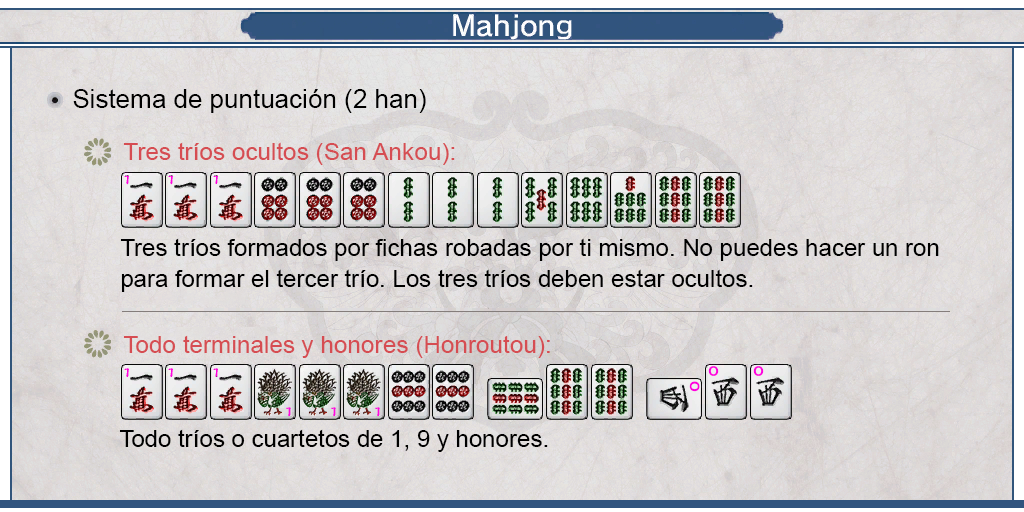
<style>
.page{position:relative;width:1024px;height:512px}
.page>*{position:absolute;margin:0}
.t1{font:26px "ArialMT";color:#000000}
.t2{font:24px "ArialMT";color:#d64d52}
.t3{font:24px/31px "ArialMT";color:#000000}
.t4{font:12.9px "Arial-BoldMT";color:#ff00de;scale:1.07 1}
.t5{font:24px "ArialMT";color:#000000}
</style>
<div class="page">
<p class="t1" style="left:73px;top:89px;width:353px;height:24px">Sistema de puntuación (2 han)</p>
<p class="t2" style="left:123px;top:142px;width:332px;height:23px">Tres tríos ocultos (San Ankou):</p>
<p class="t3" style="left:120px;top:238px;width:819px;height:54px;text-align:justify">Tres tríos formados por fichas robadas por ti mismo. No puedes hacer un ron<br>para formar el tercer trío. Los tres tríos deben estar ocultos.</p>
<p class="t2" style="left:123px;top:335px;width:427px;height:23px">Todo terminales y honores (Honroutou):</p>
<p class="t4" style="left:708px;top:366px;width:11px;height:10px">O</p>
<p class="t4" style="left:753px;top:366px;width:11px;height:10px">O</p>
<p class="t4" style="left:689px;top:381px;width:11px;height:11px;rotate:90deg">O</p>
<p class="t5" style="left:119px;top:429px;width:429px;height:23px">Todo tríos o cuartetos de 1, 9 y honores.</p>
</div>
